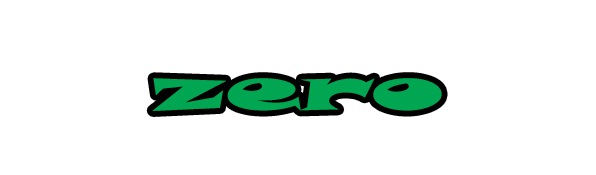
<style>
.page{position:relative;width:596px;height:175px;background:#ffffff}
.page>*{position:absolute;margin:0}
.t1{font:60px "SnapITC-Regular";color:#00a651;scale:2 1}
</style>
<div class="page">
<p class="t1" style="left:152px;top:78px;width:290px;height:33px">zero</p>
</div>
